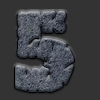
<style>
.page{position:relative;width:100px;height:100px;background:#333333}
.page>*{position:absolute;margin:0}
.t1{font:100px "JFRockSolid"}
</style>
<div class="page">
<p class="t1" style="left:15px;top:11px;width:59px;height:81px">5</p>
</div>
